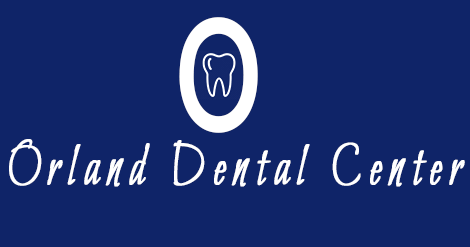
<style>
.page{position:relative;width:470px;height:247px;background:#0f2468}
.page>*{position:absolute;margin:0}
.t1{font:151.2px "ArialMT";letter-spacing:0.15em;color:#ffffff;font-weight:bold;scale:0.72 1}
.t2{font:63px "Bilbo-Regular";letter-spacing:0.15em;color:#ffffff;font-weight:bold;scale:0.72 1}
</style>
<div class="page">
<p class="t1" style="left:179px;top:17px;width:79px;height:116px">O</p>
<p class="t2" style="left:9px;top:139px;width:456px;height:48px">Orland Dental Center</p>
</div>
